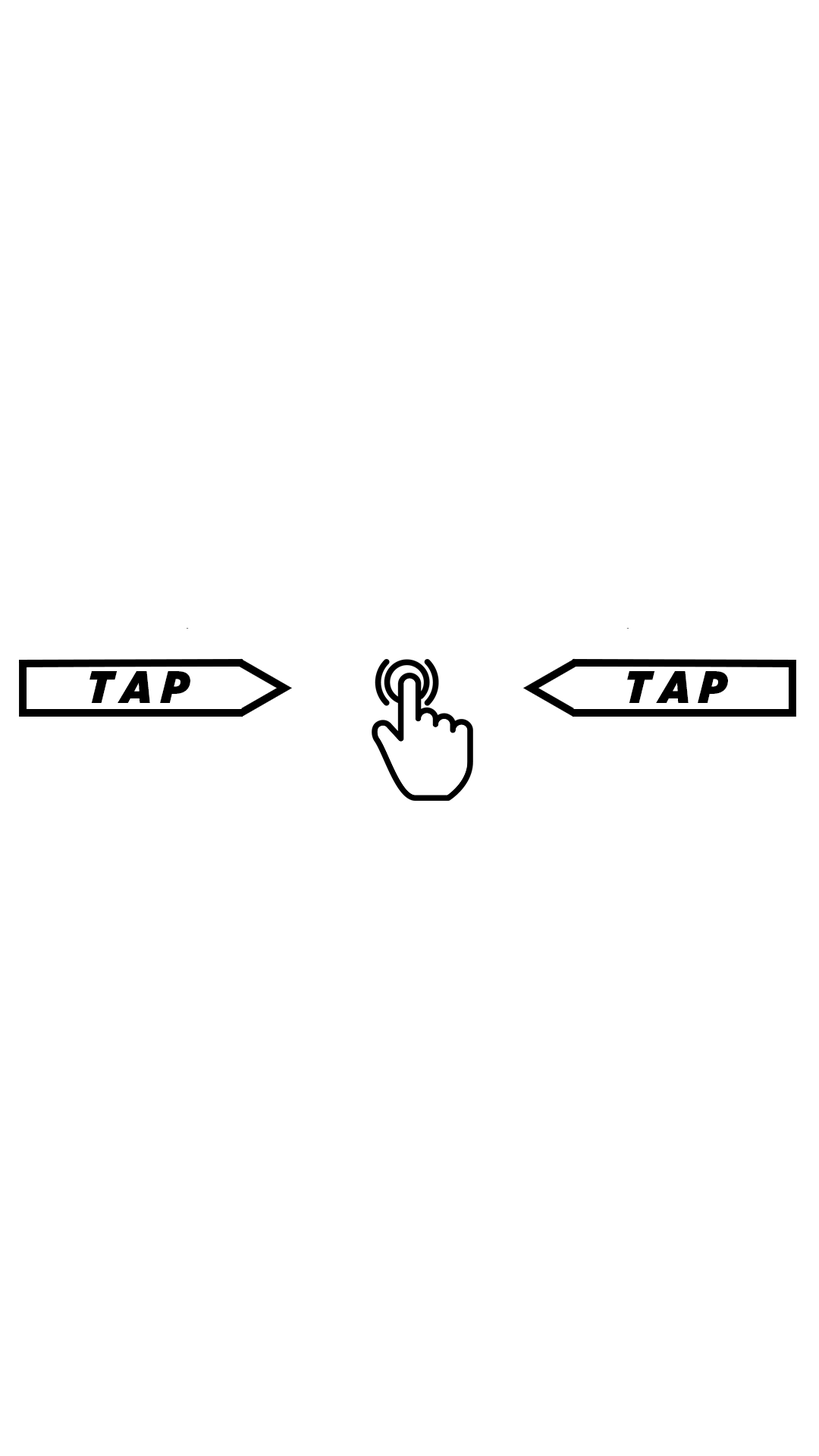
<style>
.page{position:relative;width:819px;height:1456px;background:#ffffff}
.page>*{position:absolute;margin:0}
.t1{font:45.5px "GothamNarrow-UltraItalic";color:#000000}
.t2{font:45.7px "GothamNarrow-UltraItalic";color:#000000}
</style>
<div class="page">
<p class="t1" style="left:89px;top:671px;width:101px;height:32px">T A P</p>
<p class="t2" style="left:627px;top:671px;width:101px;height:32px">T A P</p>
</div>
